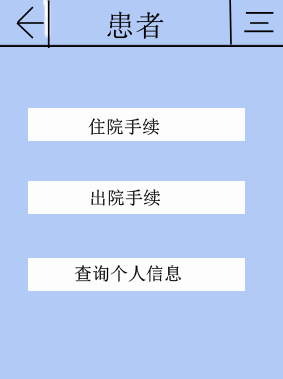
<style>
.page{position:relative;width:283px;height:379px;background:#b2caf6}
.page>*{position:absolute;margin:0}
.t1{font:30.1px "SimSun";color:#000000}
.t2{font:18px "SimSun";color:#020000}
</style>
<div class="page">
<p class="t1" style="left:107px;top:11px;width:57px;height:28px">患者</p>
<p class="t2" style="left:88px;top:118px;width:71px;height:17px">住院手续</p>
<p class="t2" style="left:91px;top:189px;width:69px;height:17px">出院手续</p>
<p class="t2" style="left:75px;top:265px;width:106px;height:17px">查询个人信息</p>
</div>
